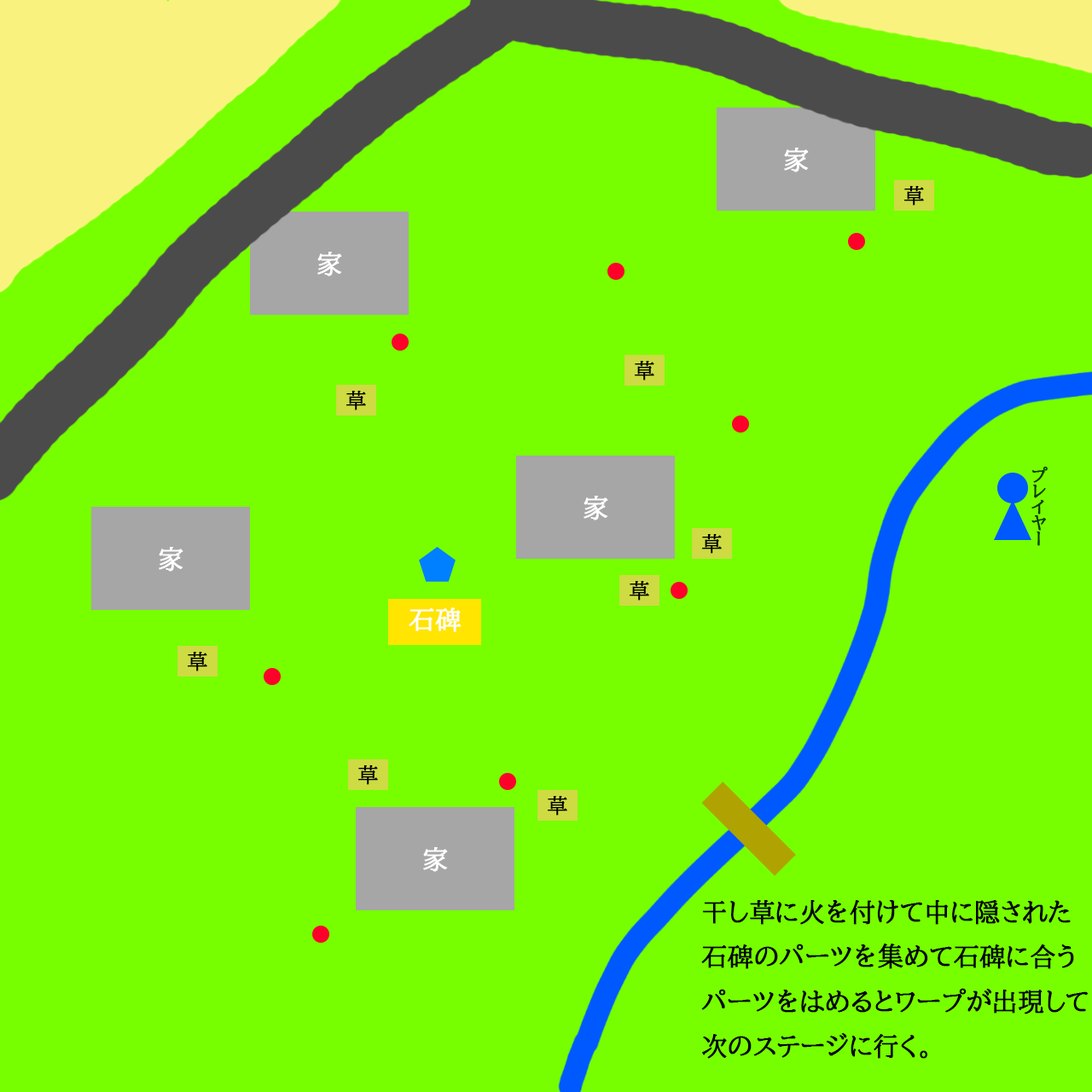
<style>
.page{position:relative;width:1092px;height:1092px;background:#77ff00}
.page>*{position:absolute;margin:0}
.t1{font:25.6px "BIZ-UDPMincho-Medium";color:#000000;font-weight:bold}
</style>
<div class="page">
<p class="t1" style="left:701px;top:900px;width:387px;height:159px">干し草に火を付けて中に隠された<br>石碑のパーツを集めて石碑に合う<br>パーツをはめるとワープが出現して<br>次のステージに行く。</p>
</div>
